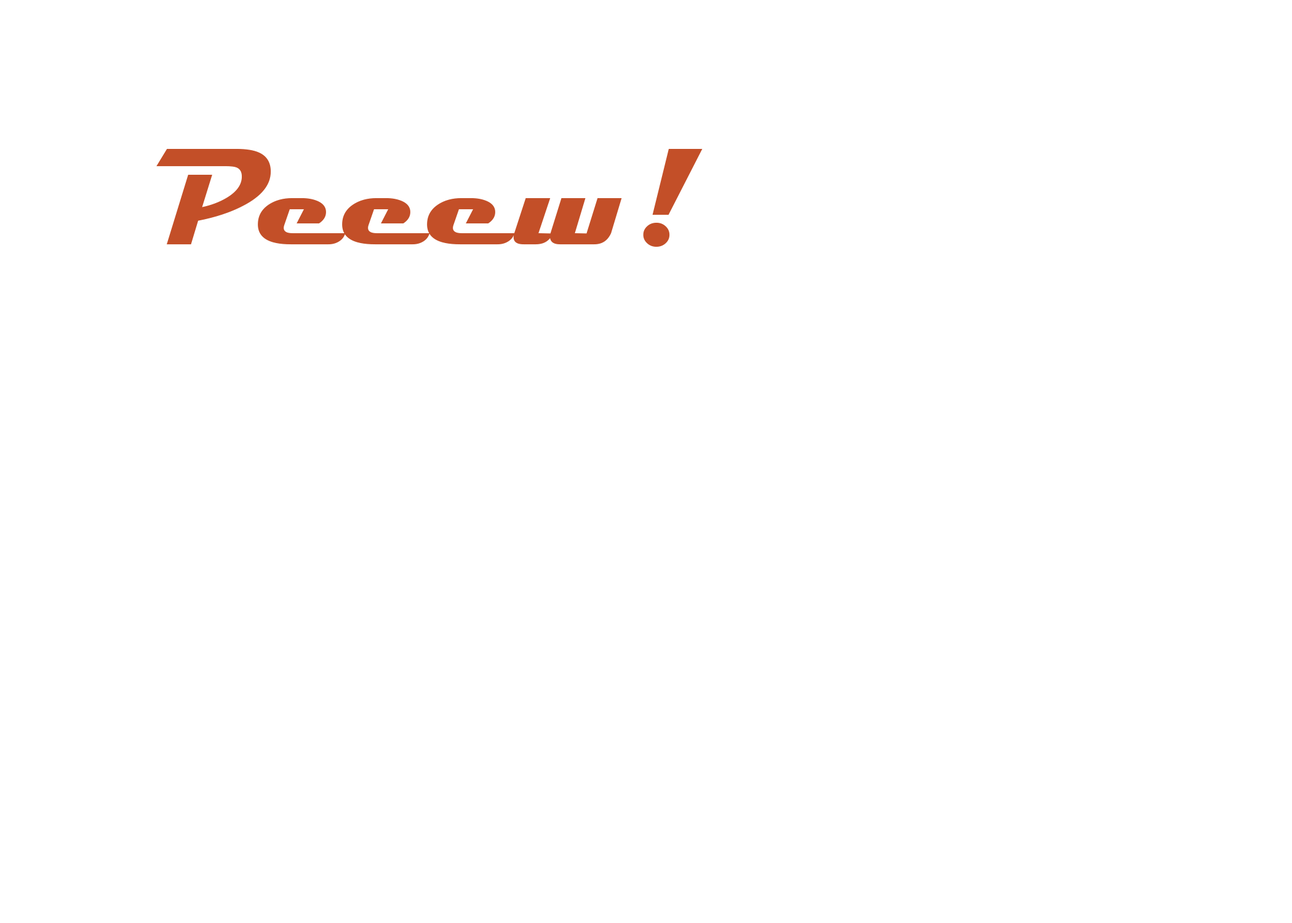
<style>
.page{position:relative;width:1292px;height:923px;background:#ffffff}
.page>*{position:absolute;margin:0}
.t1{font:138.7px "Magneto-Bold";color:#c34f28}
</style>
<div class="page">
<p class="t1" style="left:156px;top:149px;width:547px;height:98px">Peeew!</p>
</div>
